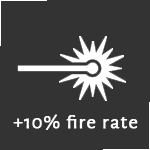
<style>
.page{position:relative;width:150px;height:150px;background:#333333}
.page>*{position:absolute;margin:0}
.t1{font:20px "AlegreyaSans-Regular";letter-spacing:0.05em;color:#fefefe;font-weight:bold}
</style>
<div class="page">
<p class="t1" style="left:13px;top:114px;width:125px;height:16px">+10% fire rate</p>
</div>
